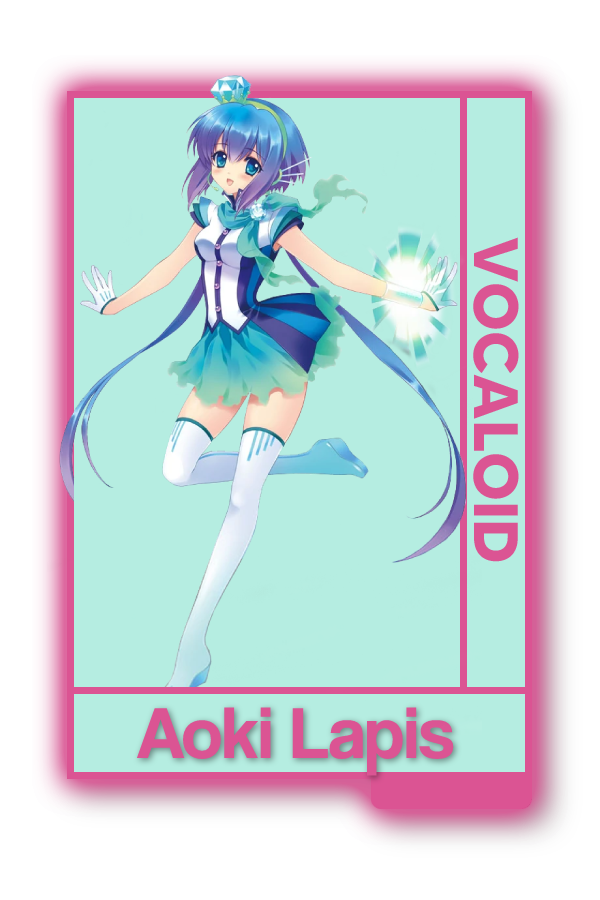
<style>
.page{position:relative;width:600px;height:900px;background:#b5ede1}
.page>*{position:absolute;margin:0}
.t1{font:62.5px "MADETOMMY-Bold";color:#db5493}
.t2{font:75px "CoolveticaRg-Regular";color:#db5493}
</style>
<div class="page">
<p class="t1" style="left:473px;top:237px;width:46px;height:325px;rotate:90deg">VOCALOID</p>
<p class="t2" style="left:136px;top:707px;width:318px;height:69px">Aoki Lapis</p>
</div>
